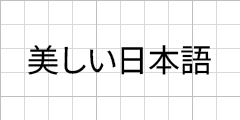
<style>
.page{position:relative;width:240px;height:120px;background:#ffffff}
.page>*{position:absolute;margin:0}
.t1{font:32px "NotoSansJP-Regular";color:#000000}
</style>
<div class="page">
<p class="t1" style="left:28px;top:45px;width:183px;height:30px">美しい日本語</p>
</div>
